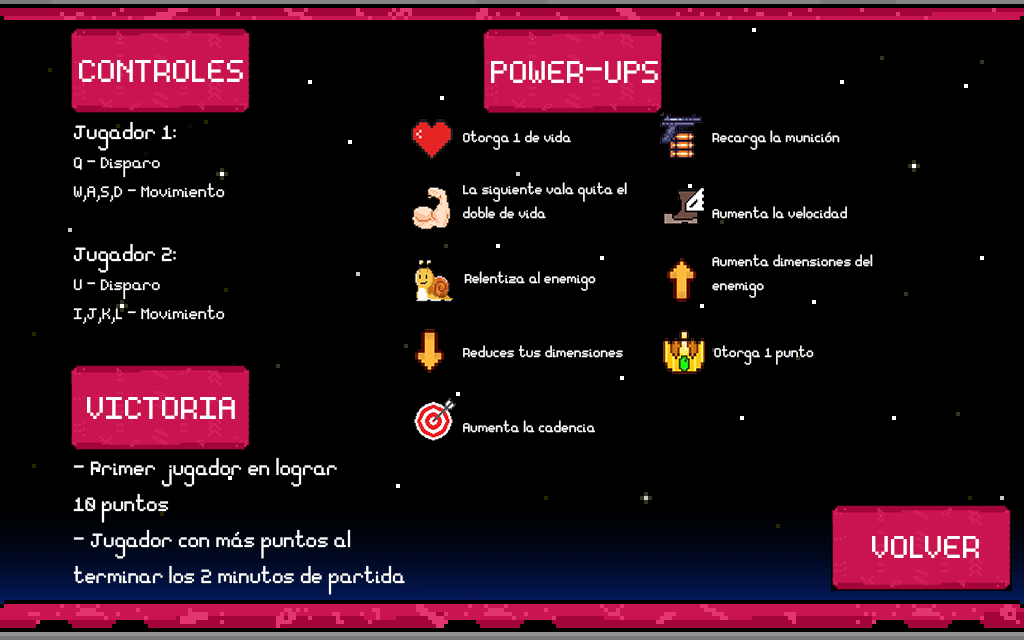
<style>
.page{position:relative;width:1024px;height:640px;background:#000000}
.page>*{position:absolute;margin:0}
.t1{font:50.5px "Essential";color:#fefefe}
.t2{font:24px "Essential";color:#fefefe}
.t3{font:30px "Essential";color:#fefefe}
.t4{font:20.2px "Essential";color:#fefefe}
</style>
<div class="page">
<p class="t1" style="left:79px;top:60px;width:164px;height:22px">CONTROLES</p>
<p class="t1" style="left:491px;top:61px;width:167px;height:22px">POWER-UPS</p>
<p class="t2" style="left:73px;top:121px;width:152px;height:203px"><span class="t3">Jugador 1:<br></span>Q - Disparo<br>W,A,S,D - Movimiento<br><br><span class="t3">Jugador 2:<br></span>U - Disparo<br>I,J,K,L - Movimiento</p>
<p class="t4" style="left:463px;top:130px;width:108px;height:20px">Otorga 1 de vida</p>
<p class="t4" style="left:712px;top:130px;width:128px;height:20px">Recarga la munición</p>
<p class="t4" style="left:463px;top:182px;width:164px;height:37px">La siguiente vala quita el <br>doble de vida</p>
<p class="t4" style="left:712px;top:206px;width:135px;height:13px">Aumenta la velocidad</p>
<p class="t4" style="left:712px;top:254px;width:161px;height:44px">Aumenta dimensiones del <br>enemigo</p>
<p class="t4" style="left:464px;top:271px;width:132px;height:20px">Relentiza al enemigo</p>
<p class="t4" style="left:463px;top:345px;width:160px;height:13px">Reduces tus dimensiones</p>
<p class="t4" style="left:714px;top:345px;width:100px;height:20px">Otorga 1 punto</p>
<p class="t1" style="left:87px;top:397px;width:148px;height:22px">VICTORIA</p>
<p class="t4" style="left:463px;top:420px;width:132px;height:13px">Aumenta la cadencia</p>
<p class="t3" style="left:73px;top:457px;width:332px;height:138px">- Primer jugador en lograr<br>10 puntos<br>- Jugador con más puntos al <br>terminar los 2 minutos de partida</p>
<p class="t1" style="left:872px;top:536px;width:107px;height:22px">VOLVER</p>
</div>
